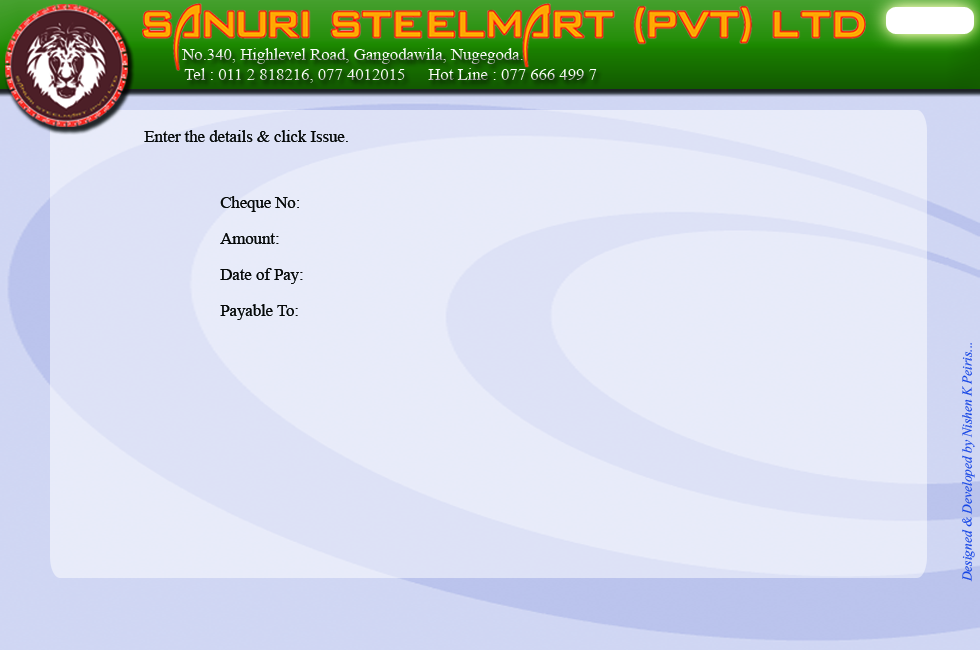
<style>
.page{position:relative;width:980px;height:650px;background:#e8ebf9}
.page>*{position:absolute;margin:0}
.t1{font:16.6px "TimesNewRomanPSMT"}
.t2{font:16.7px "TimesNewRomanPSMT";color:#060808}
.t3{font:16.7px/18px "TimesNewRomanPSMT";color:#060808}
.t4{font:16.7px "Vijaya";color:#1546e5}
</style>
<div class="page">
<p class="t1" style="left:181px;top:48px;width:342px;height:16px">No.340, Highlevel Road, Gangodawila, Nugegoda.</p>
<p class="t1" style="left:184px;top:68px;width:221px;height:15px">Tel : 011 2 818216, 077 4012015</p>
<p class="t1" style="left:428px;top:68px;width:169px;height:12px">Hot Line : 077 666 499 7</p>
<p class="t2" style="left:144px;top:130px;width:204px;height:12px">Enter the details &amp; click Issue.</p>
<p class="t3" style="left:220px;top:196px;width:83px;height:124px">Cheque No: <br><br>Amount:<br><br>Date of Pay:<br><br>Payable To:</p>
<p class="t4" style="left:962px;top:343px;width:13px;height:239px;rotate:-90deg">Designed &amp; Developed by Nishen K Peiris...</p>
</div>
